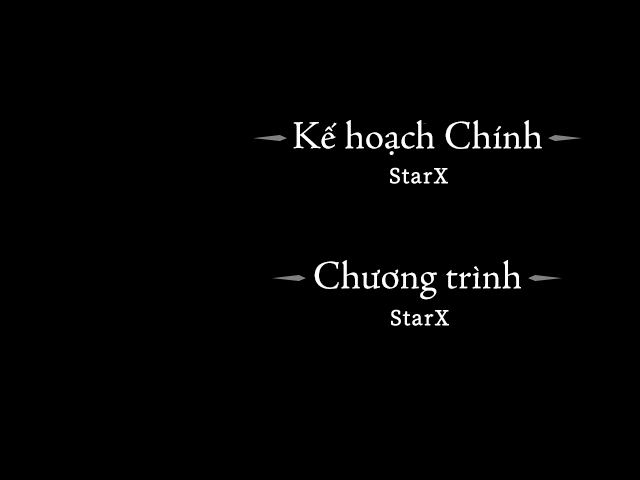
<style>
.page{position:relative;width:640px;height:480px;background:#000000}
.page>*{position:absolute;margin:0}
.t1{font:40px "SVN-AdobeJenson";color:#ffffff}
</style>
<div class="page">
<p class="t1" style="left:293px;top:120px;width:249px;height:35px">Kế hoạch Chính</p>
<p class="t1" style="left:314px;top:260px;width:207px;height:40px">Chương trình</p>
</div>
